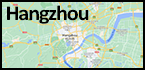
<style>
.page{position:relative;width:145px;height:70px}
.page>*{position:absolute;margin:0}
.t1{font:21.3px "Calibri-Bold";letter-spacing:-0.05em;color:#000000;scale:1.04 1}
</style>
<div class="page">
<p class="t1" style="left:7px;top:5px;width:82px;height:19px">Hangzhou</p>
</div>
